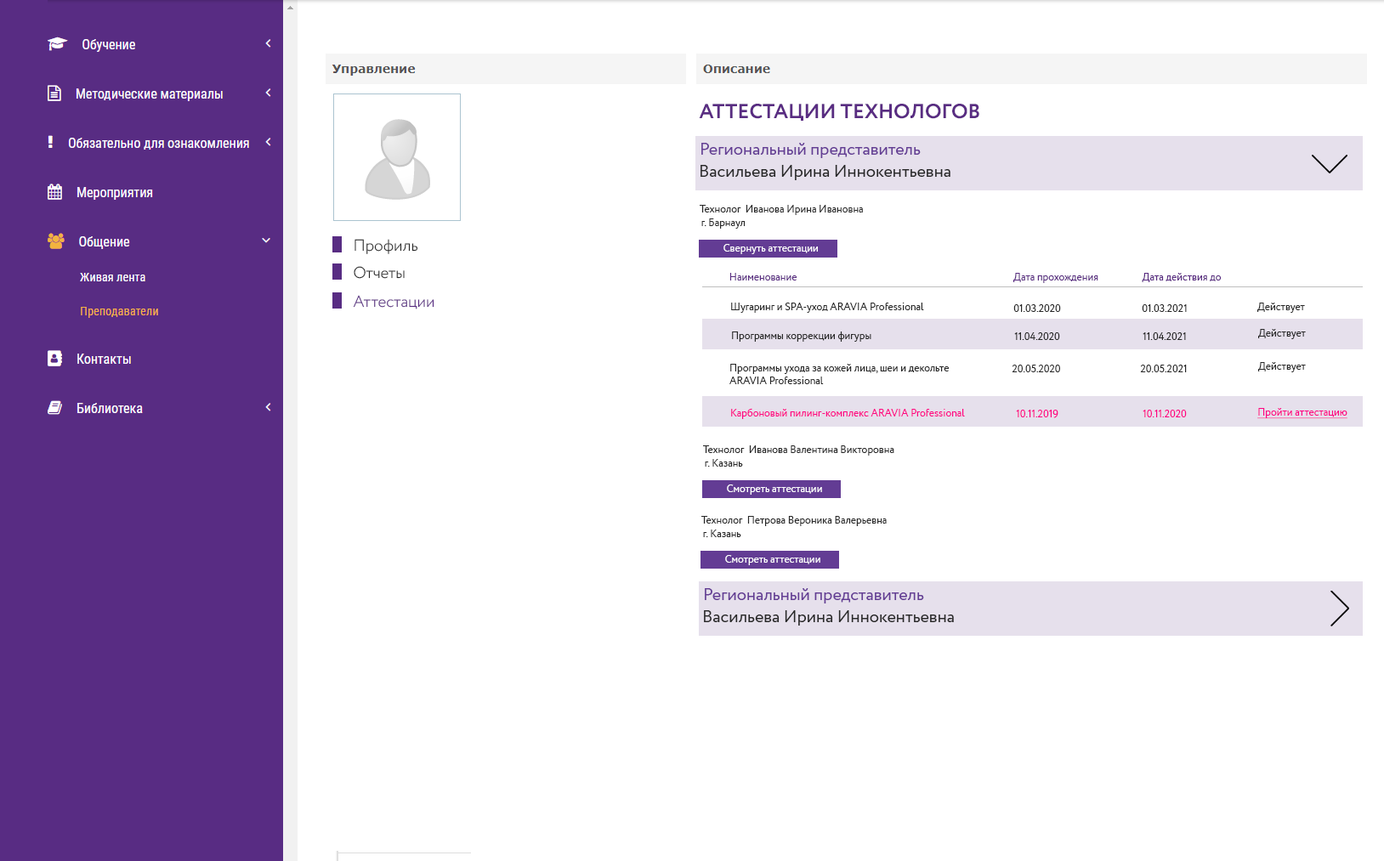
<style>
.page{position:relative;width:1384px;height:861px;background:#ffffff}
.page>*{position:absolute;margin:0}
.t1{font:20.4px "Circe-Bold";color:#592c82;text-transform:uppercase}
.t2{font:17px "Circe-Regular";color:#633c94}
.t3{font:17px "Circe-Regular";color:#272727}
.t4{font:10.2px "Circe-Regular";color:#272727}
.t5{font:15.9px "Circe-Light";color:#272727}
.t6{font:10.2px "Circe-Regular";color:#ffffff}
.t7{font:10.2px "Circe-Regular";color:#592c81}
.t8{font:15.9px "Circe-Light";color:#592c82}
.t9{font:10.2px "Circe-Regular";color:#ff0081}
.t10{font:10.2px "Circe-Regular";color:#ff0081;text-decoration:underline}
</style>
<div class="page">
<p class="t1" style="left:699px;top:104px;width:281px;height:17px">аттестации технологов</p>
<p class="t2" style="left:702px;top:143px;width:219px;height:15px">Региональный представитель</p>
<p class="t3" style="left:701px;top:165px;width:250px;height:15px">Васильева Ирина Иннокентьевна</p>
<p class="t4" style="left:700px;top:205px;width:163px;height:10px">Технолог  Иванова Ирина Ивановна</p>
<p class="t4" style="left:702px;top:219px;width:44px;height:10px">г. Барнаул</p>
<p class="t5" style="left:355px;top:239px;width:63px;height:15px">Профиль</p>
<p class="t6" style="left:724px;top:244px;width:94px;height:10px">Свернуть аттестации</p>
<p class="t5" style="left:354px;top:266px;width:51px;height:13px">Отчеты</p>
<p class="t7" style="left:730px;top:273px;width:68px;height:8px">Наименование</p>
<p class="t7" style="left:1014px;top:273px;width:85px;height:10px">Дата прохождения</p>
<p class="t7" style="left:1142px;top:273px;width:80px;height:9px">Дата действия до</p>
<p class="t8" style="left:353px;top:295px;width:82px;height:15px">Аттестации</p>
<p class="t4" style="left:731px;top:303px;width:193px;height:10px">Шугаринг и SPA-уход ARAVIA Professional</p>
<p class="t4" style="left:1014px;top:304px;width:47px;height:8px">01.03.2020</p>
<p class="t4" style="left:1142px;top:304px;width:45px;height:8px">01.03.2021</p>
<p class="t4" style="left:1258px;top:303px;width:47px;height:10px">Действует</p>
<p class="t4" style="left:1258px;top:329px;width:48px;height:10px">Действует</p>
<p class="t4" style="left:732px;top:332px;width:140px;height:10px">Программы коррекции фигуры</p>
<p class="t4" style="left:1014px;top:332px;width:46px;height:8px">11.04.2020</p>
<p class="t4" style="left:1143px;top:332px;width:43px;height:8px">11.04.2021</p>
<p class="t4" style="left:730px;top:364px;width:220px;height:20px">Программы ухода за кожей лица, шеи и декольте <br>ARAVIA Professional</p>
<p class="t4" style="left:1012px;top:365px;width:48px;height:7px">20.05.2020</p>
<p class="t4" style="left:1140px;top:365px;width:47px;height:7px">20.05.2021</p>
<p class="t4" style="left:1258px;top:362px;width:48px;height:10px">Действует</p>
<p class="t9" style="left:731px;top:408px;width:234px;height:11px">Карбоновый пилинг-комплекс ARAVIA Professional</p>
<p class="t9" style="left:1016px;top:410px;width:43px;height:8px">10.11.2019</p>
<p class="t9" style="left:1143px;top:410px;width:44px;height:8px">10.11.2020</p>
<p class="t10" style="left:1258px;top:408px;width:90px;height:11px">Пройти аттестацию</p>
<p class="t4" style="left:703px;top:446px;width:192px;height:10px">Технолог  Иванова Валентина Викторовна</p>
<p class="t4" style="left:705px;top:459px;width:38px;height:8px">г. Казань</p>
<p class="t6" style="left:727px;top:485px;width:95px;height:10px">Смотреть аттестации</p>
<p class="t4" style="left:702px;top:516px;width:185px;height:10px">Технолог  Петрова Вероника Валерьевна</p>
<p class="t4" style="left:703px;top:530px;width:38px;height:7px">г. Казань</p>
<p class="t6" style="left:725px;top:555px;width:96px;height:10px">Смотреть аттестации</p>
<p class="t2" style="left:705px;top:588px;width:219px;height:16px">Региональный представитель</p>
<p class="t3" style="left:704px;top:611px;width:250px;height:15px">Васильева Ирина Иннокентьевна</p>
</div>
